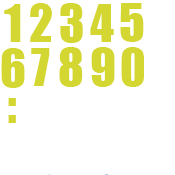
<style>
.page{position:relative;width:175px;height:175px;background:#ffffff}
.page>*{position:absolute;margin:0}
.t1{font:48px "Impact";color:#d4d632}
</style>
<div class="page">
<p class="t1" style="left:4px;top:4px;width:17px;height:38px">1</p>
<p class="t1" style="left:30px;top:3px;width:22px;height:39px">2</p>
<p class="t1" style="left:60px;top:3px;width:23px;height:40px">3</p>
<p class="t1" style="left:90px;top:4px;width:24px;height:38px">4</p>
<p class="t1" style="left:120px;top:3px;width:24px;height:39px">5</p>
<p class="t1" style="left:1px;top:48px;width:24px;height:40px">6</p>
<p class="t1" style="left:31px;top:48px;width:19px;height:38px">7</p>
<p class="t1" style="left:59px;top:47px;width:24px;height:40px">8</p>
<p class="t1" style="left:91px;top:47px;width:24px;height:40px">9</p>
<p class="t1" style="left:121px;top:47px;width:23px;height:40px">0</p>
<p class="t1" style="left:8px;top:98px;width:8px;height:25px">:</p>
</div>
